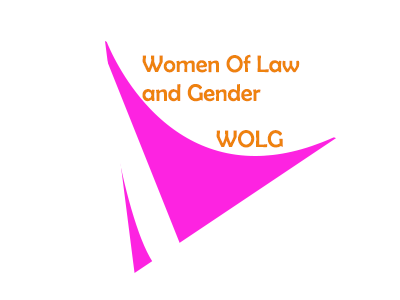
<style>
.page{position:relative;width:400px;height:300px;background:#ffffff}
.page>*{position:absolute;margin:0}
.t1{font:24px "BerlinSansFB-Reg";color:#ee820e}
</style>
<div class="page">
<p class="t1" style="left:142px;top:54px;width:158px;height:48px">Women Of Law<br>and Gender</p>
<p class="t1" style="left:216px;top:130px;width:67px;height:18px">WOLG</p>
</div>
